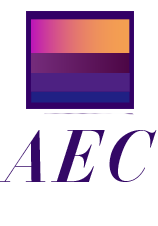
<style>
.page{position:relative;width:158px;height:226px;background:#ffffff}
.page>*{position:absolute;margin:0}
.t1{font:72px "KarloffPositiveStd-BldIta";letter-spacing:0.075em;color:#340866}
</style>
<div class="page">
<p class="t1" style="left:0px;top:130px;width:157px;height:52px">AEC</p>
</div>
